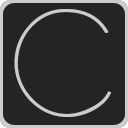
<style>
.page{position:relative;width:128px;height:128px;background:#242424}
.page>*{position:absolute;margin:0}
.t1{font:150px "Raleway-Thin";color:#cccccc;scale:1.05 1}
</style>
<div class="page">
<p class="t1" style="left:14px;top:9px;width:98px;height:108px">C</p>
</div>
